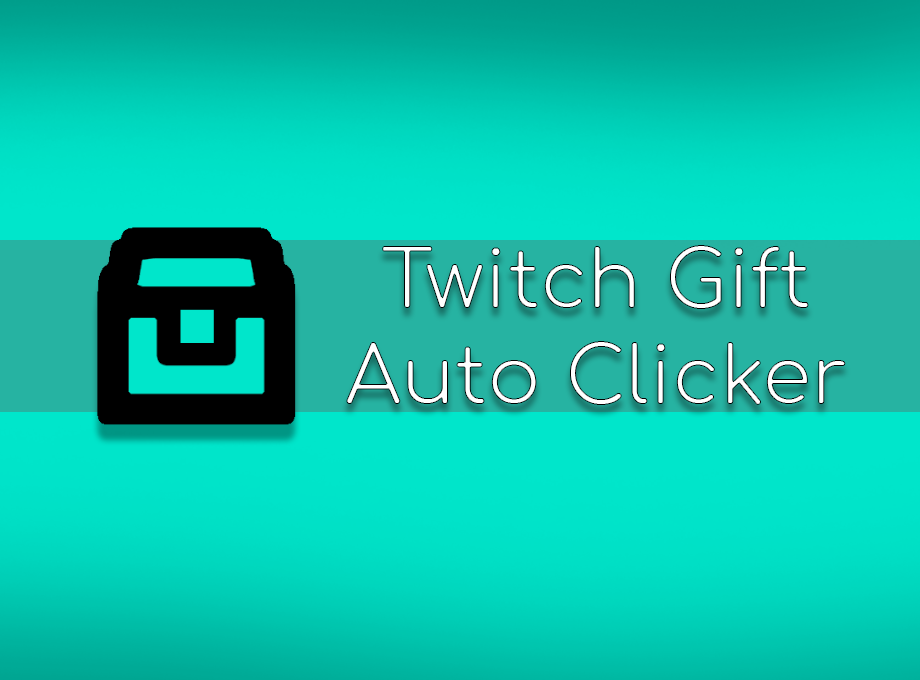
<style>
.page{position:relative;width:920px;height:680px}
.page>*{position:absolute;margin:0}
.t1{font:80px "Comfortaa-Regular";color:#ffffff}
</style>
<div class="page">
<p class="t1" style="left:346px;top:245px;width:500px;height:160px;text-align:center">Twitch Gift<br>Auto Clicker</p>
</div>
